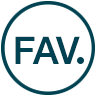
<style>
.page{position:relative;width:96px;height:96px;background:#ffffff}
.page>*{position:absolute;margin:0}
.t1{font:38px "HelveticaNeue-Medium";color:#004251}
</style>
<div class="page">
<p class="t1" style="left:15px;top:36px;width:65px;height:28px">FAV</p>
</div>
